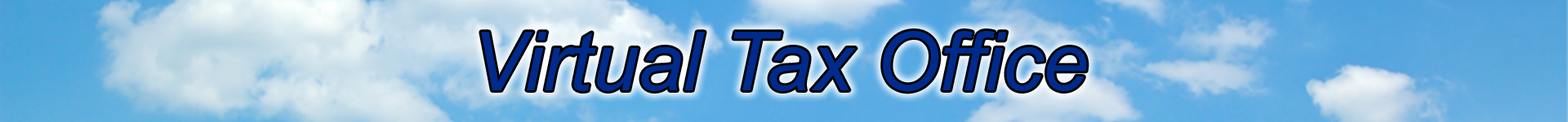
<style>
.page{position:relative;width:1568px;height:122px}
.page>*{position:absolute;margin:0}
.t1{font:81.7px "Arial-ItalicMT";color:#002b8c}
</style>
<div class="page">
<p class="t1" style="left:481px;top:31px;width:606px;height:61px">Virtual Tax Office</p>
</div>
